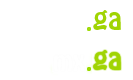
<style>
.page{position:relative;width:133px;height:80px;background:#ffffff}
.page>*{position:absolute;margin:0}
.t1{font:27.1px "HoboStd";color:#a0d403}
</style>
<div class="page">
<p class="t1" style="left:93px;top:10px;width:28px;height:20px">ga</p>
<p class="t1" style="left:93px;top:50px;width:28px;height:20px">ga</p>
</div>
